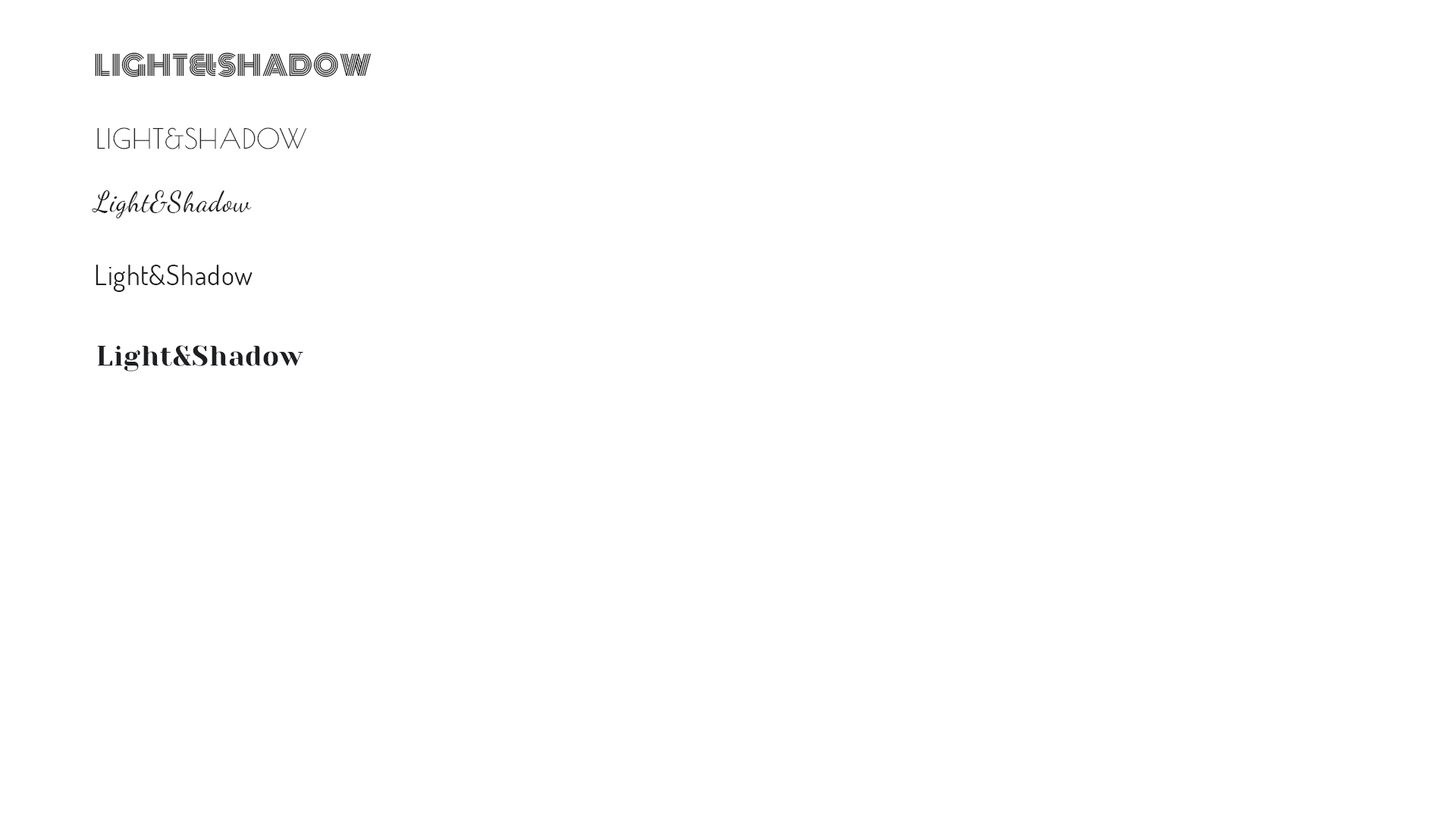
<style>
.page{position:relative;width:1456px;height:819px;background:#ffffff}
.page>*{position:absolute;margin:0}
.t1{font:27.3px "Monoton-Regular";letter-spacing:0.025em;color:#1e1f22}
.t2{font:27.3px "PoiretOne-Regular";letter-spacing:0.025em;color:#1e1f22}
.t3{font:27.3px "DancingScript-Regular";letter-spacing:0.025em;color:#1e1f22}
.t4{font:27.3px "Dosis-Regular";letter-spacing:0.025em;color:#1e1f22}
.t5{font:27.3px "YesevaOne-Regular";letter-spacing:0.025em;color:#1e1f22}
</style>
<div class="page">
<p class="t1" style="left:95px;top:52px;width:277px;height:25px">LIGHT&amp;SHADOW</p>
<p class="t2" style="left:97px;top:127px;width:209px;height:22px">LIGHT&amp;SHADOW</p>
<p class="t3" style="left:92px;top:190px;width:160px;height:28px">Light&amp;Shadow</p>
<p class="t4" style="left:96px;top:265px;width:157px;height:27px">Light&amp;Shadow</p>
<p class="t5" style="left:97px;top:345px;width:206px;height:27px">Light&amp;Shadow</p>
</div>
